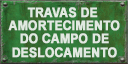
<style>
.page{position:relative;width:128px;height:64px}
.page>*{position:absolute;margin:0}
.t1{font:13.3px/13.3px "Arial-BoldMT";color:#e1e9e1;text-transform:uppercase;font-weight:bold;scale:0.9 1}
</style>
<div class="page">
<p class="t1" style="left:8px;top:7px;width:112px;height:51px;text-align:center">Travas de <br>Amortecimento<br>do Campo de<br>Deslocamento</p>
</div>
